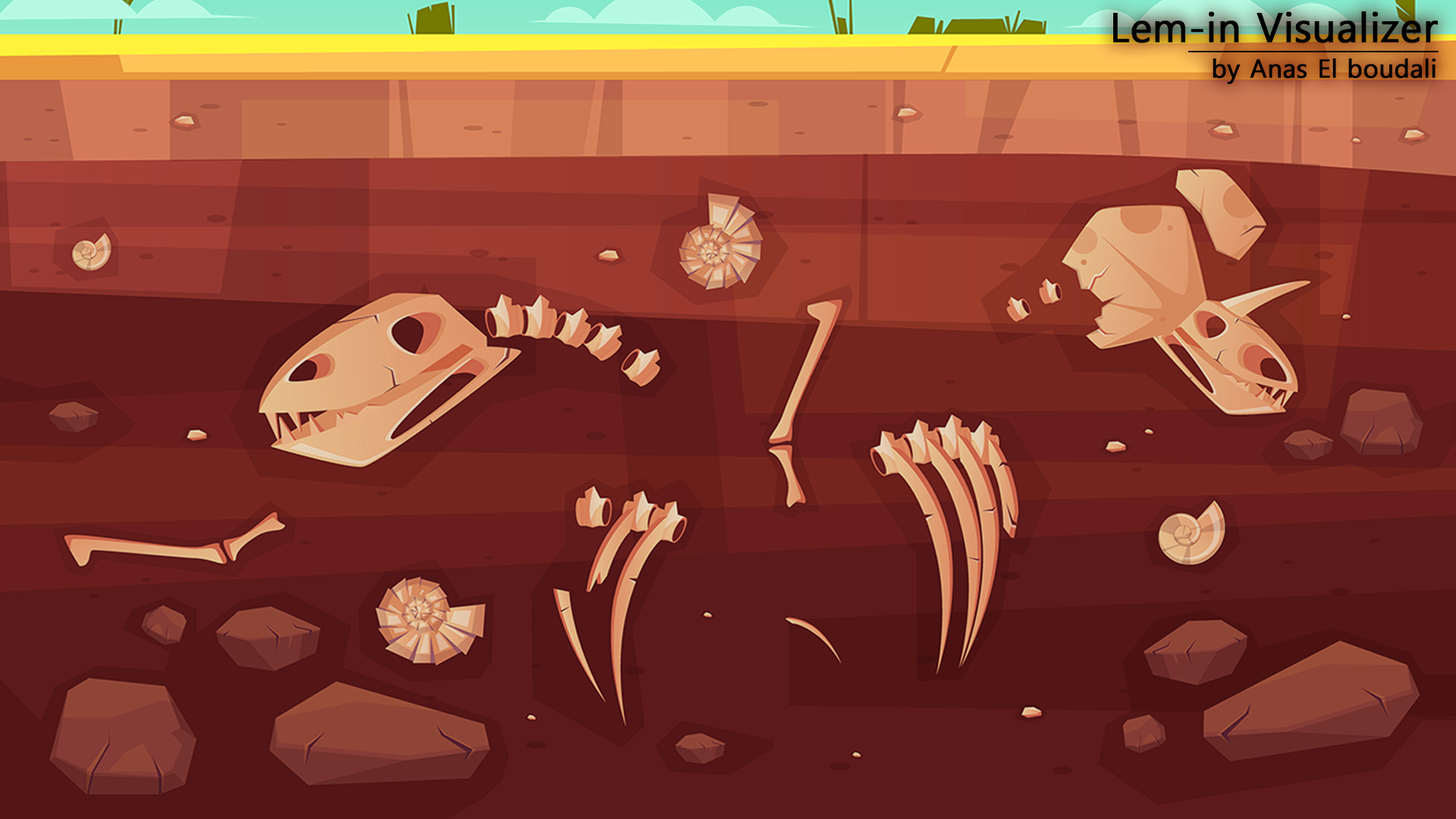
<style>
.page{position:relative;width:1456px;height:819px}
.page>*{position:absolute;margin:0}
.t1{font:40px "MalgunGothic";color:#000000;font-weight:bold}
.t2{font:16.7px "MalgunGothic";color:#000000;font-weight:bold;scale:2.36 1}
.t3{font:25.1px "MalgunGothic";color:#000000;font-weight:bold}
</style>
<div class="page">
<p class="t1" style="left:1113px;top:11px;width:325px;height:32px">Lem-in Visualizer</p>
<p class="t2" style="left:1188px;top:51px;width:251px;height:1px">______________</p>
<p class="t3" style="left:1213px;top:58px;width:223px;height:26px">by Anas El boudali</p>
</div>
